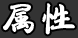
<style>
.page{position:relative;width:78px;height:38px;background:#333333}
.page>*{position:absolute;margin:0}
.t1{font:38px "Tensentype-FanXiaoGeKaiShuJ";color:#ffffff;font-weight:bold}
</style>
<div class="page">
<p class="t1" style="left:3px;top:3px;width:72px;height:32px">属性</p>
</div>
